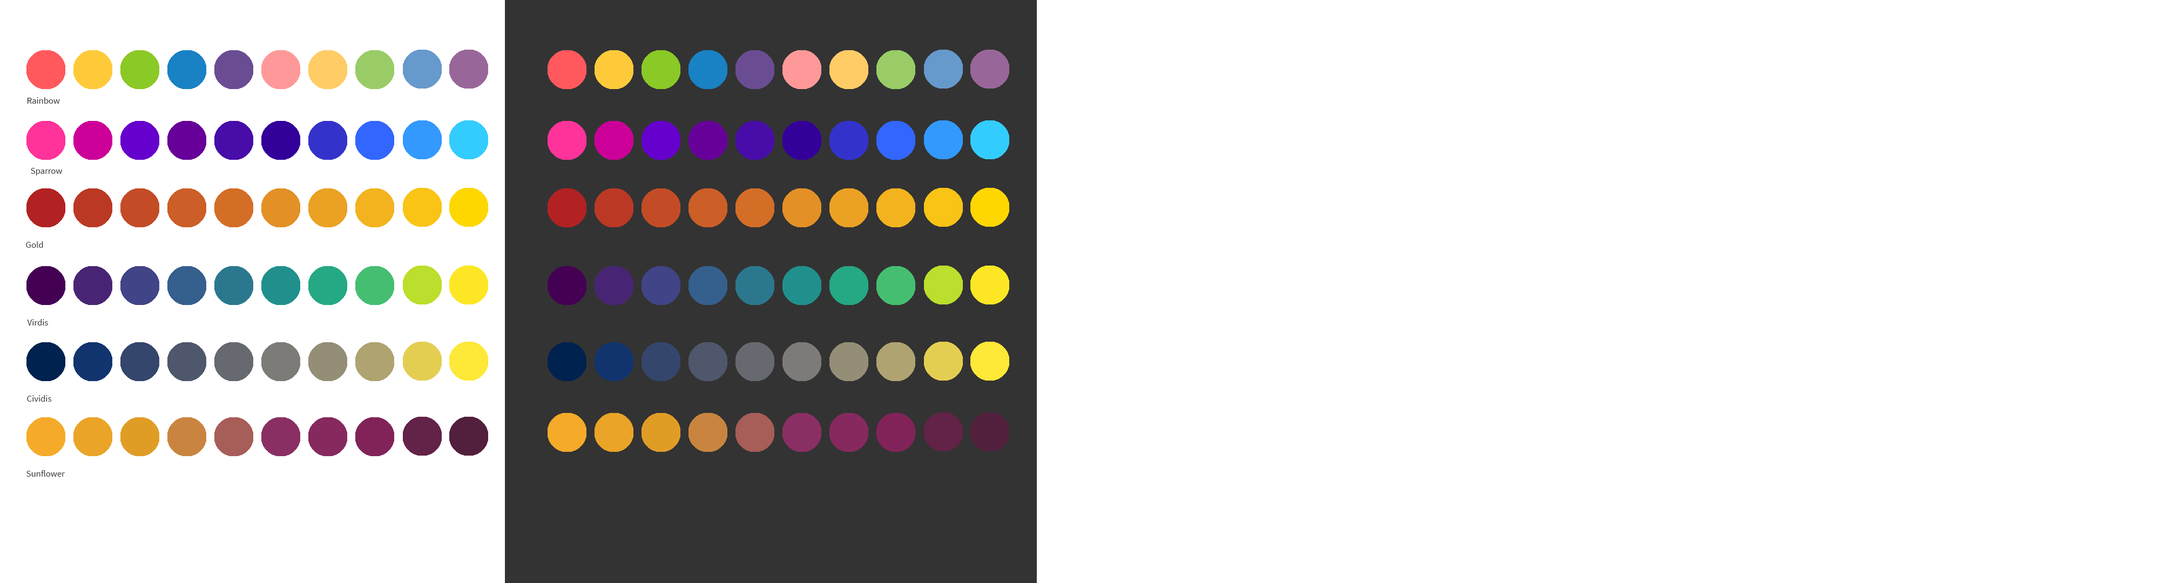
<style>
.page{position:relative;width:2160px;height:583px;background:#ffffff}
.page>*{position:absolute;margin:0}
.t1{font:9px "SourceSansPro-Regular";color:#333333}
</style>
<div class="page">
<p class="t1" style="left:27px;top:97px;width:33px;height:7px">Rainbow</p>
<p class="t1" style="left:31px;top:168px;width:31px;height:7px">Sparrow</p>
<p class="t1" style="left:26px;top:241px;width:17px;height:7px">Gold</p>
<p class="t1" style="left:27px;top:319px;width:21px;height:7px">Virdis</p>
<p class="t1" style="left:27px;top:395px;width:25px;height:7px">Cividis</p>
<p class="t1" style="left:26px;top:470px;width:39px;height:7px">Sunflower</p>
</div>
